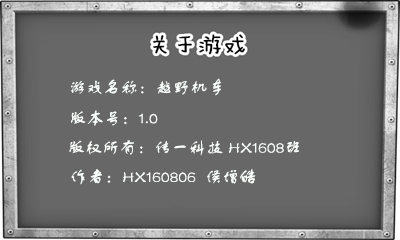
<style>
.page{position:relative;width:400px;height:240px;background:#676767}
.page>*{position:absolute;margin:0}
.t1{font:17.3px "FZSTK--GBK1-0";color:#f9fefb}
</style>
<div class="page">
<p class="t1" style="left:71px;top:78px;width:150px;height:18px">游戏名称：越野机车</p>
<p class="t1" style="left:71px;top:110px;width:87px;height:16px">版本号：1.0</p>
<p class="t1" style="left:69px;top:140px;width:230px;height:16px">版权所有：传一科技 HX1608班</p>
<p class="t1" style="left:71px;top:169px;width:185px;height:16px">作者：HX160806  侯增皓</p>
</div>
